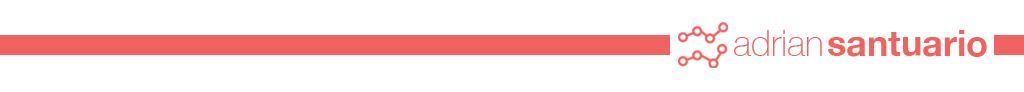
<style>
.page{position:relative;width:1024px;height:92px;background:#ffffff}
.page>*{position:absolute;margin:0}
.t1{font:36px "HelveticaNeue-Thin";color:#f1635f}
.t2{font:36px "HelveticaNeue-Bold";color:#f1635f}
</style>
<div class="page">
<p class="t1" style="left:734px;top:30px;width:88px;height:26px">adrian</p>
<p class="t2" style="left:828px;top:30px;width:159px;height:27px">santuario</p>
</div>
